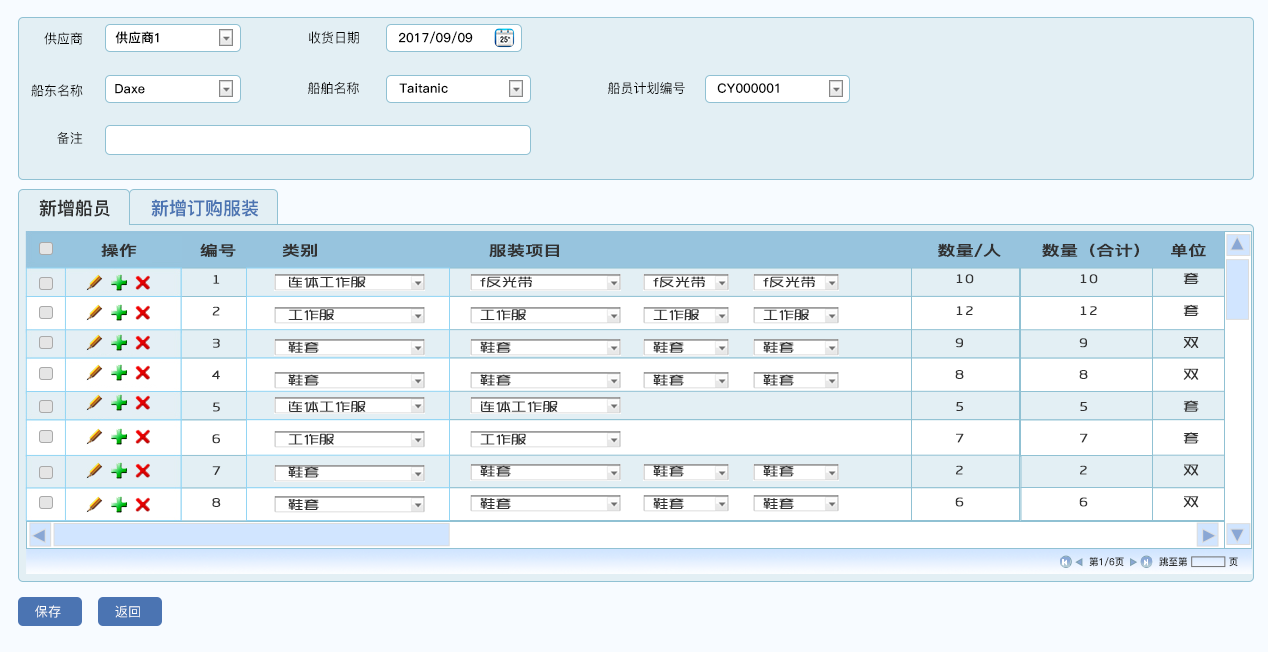
<style>
.page{position:relative;width:1268px;height:652px;background:#e3eff4}
.page>*{position:absolute;margin:0}
.t1{font:13.2px "PingFang-SC-Medium";color:#050505}
.t2{font:13px "PingFang-SC-Heavy";color:#050505}
.t3{font:18px "PingFang-SC-Heavy";color:#313131}
.t4{font:18px "PingFang-SC-Heavy";color:#4b74b2}
.t5{font:14px "PingFang-SC-Bold";color:#323232;font-weight:bold;scale:1.27 1}
.t6{font:12.4px/31.9px "RTWSYueRoudGoDemo-Regular";color:#323232;font-weight:bold;scale:1.27 1}
.t7{font:9.9px "PingFang-SC-Heavy";color:#2d2e2e;scale:0.96 1}
.t8{font:13.2px "PingFang-SC-Medium";color:#ffffff}
</style>
<div class="page">
<p class="t1" style="left:44px;top:32px;width:39px;height:13px">供应商</p>
<p class="t2" style="left:115px;top:31px;width:44px;height:13px">供应商1</p>
<p class="t1" style="left:309px;top:31px;width:50px;height:13px">收货日期</p>
<p class="t2" style="left:399px;top:31px;width:74px;height:13px">2017/09/09</p>
<p class="t1" style="left:31px;top:84px;width:52px;height:13px">船东名称</p>
<p class="t2" style="left:115px;top:84px;width:30px;height:10px">Daxe</p>
<p class="t1" style="left:308px;top:81px;width:51px;height:13px">船舶名称</p>
<p class="t2" style="left:399px;top:83px;width:49px;height:10px">Taitanic</p>
<p class="t1" style="left:608px;top:81px;width:77px;height:13px">船员计划编号</p>
<p class="t2" style="left:717px;top:83px;width:62px;height:10px">CY000001</p>
<p class="t1" style="left:57px;top:131px;width:26px;height:13px">备注</p>
<p class="t3" style="left:39px;top:199px;width:71px;height:18px">新增船员</p>
<p class="t4" style="left:151px;top:199px;width:108px;height:18px">新增订购服装</p>
<p class="t5" style="left:101px;top:243px;width:36px;height:14px">操作</p>
<p class="t5" style="left:200px;top:243px;width:36px;height:14px">编号</p>
<p class="t5" style="left:282px;top:243px;width:35px;height:14px">类别</p>
<p class="t5" style="left:489px;top:243px;width:70px;height:14px">服装项目</p>
<p class="t5" style="left:938px;top:243px;width:63px;height:14px">数量/人</p>
<p class="t5" style="left:1042px;top:243px;width:97px;height:14px">数量（合计）</p>
<p class="t5" style="left:1171px;top:243px;width:35px;height:14px">单位</p>
<p class="t6" style="left:212px;top:275px;width:9px;height:232px;text-align:right">1<br>2<br>3<br>4<br>5<br>6<br>7<br>8<br><br><br><br>14<br>15<br>16</p>
<p class="t6" style="left:955px;top:274px;width:19px;height:233px">10<br>12<br>9<br>8<br>5<br>7<br>2<br>6</p>
<p class="t6" style="left:1079px;top:274px;width:19px;height:233px">10<br>12<br>9<br>8<br>5<br>7<br>2<br>6</p>
<p class="t6" style="left:1183px;top:272px;width:16px;height:236px;text-align:right">套<br>套<br>双<br>双<br>套<br>套<br>双<br>双</p>
<p class="t7" style="left:1089px;top:557px;width:35px;height:10px">第1/6页</p>
<p class="t7" style="left:1159px;top:557px;width:79px;height:10px">跳至第             页</p>
<p class="t8" style="left:35px;top:605px;width:26px;height:13px">保存</p>
<p class="t8" style="left:115px;top:605px;width:25px;height:13px">返回</p>
</div>
